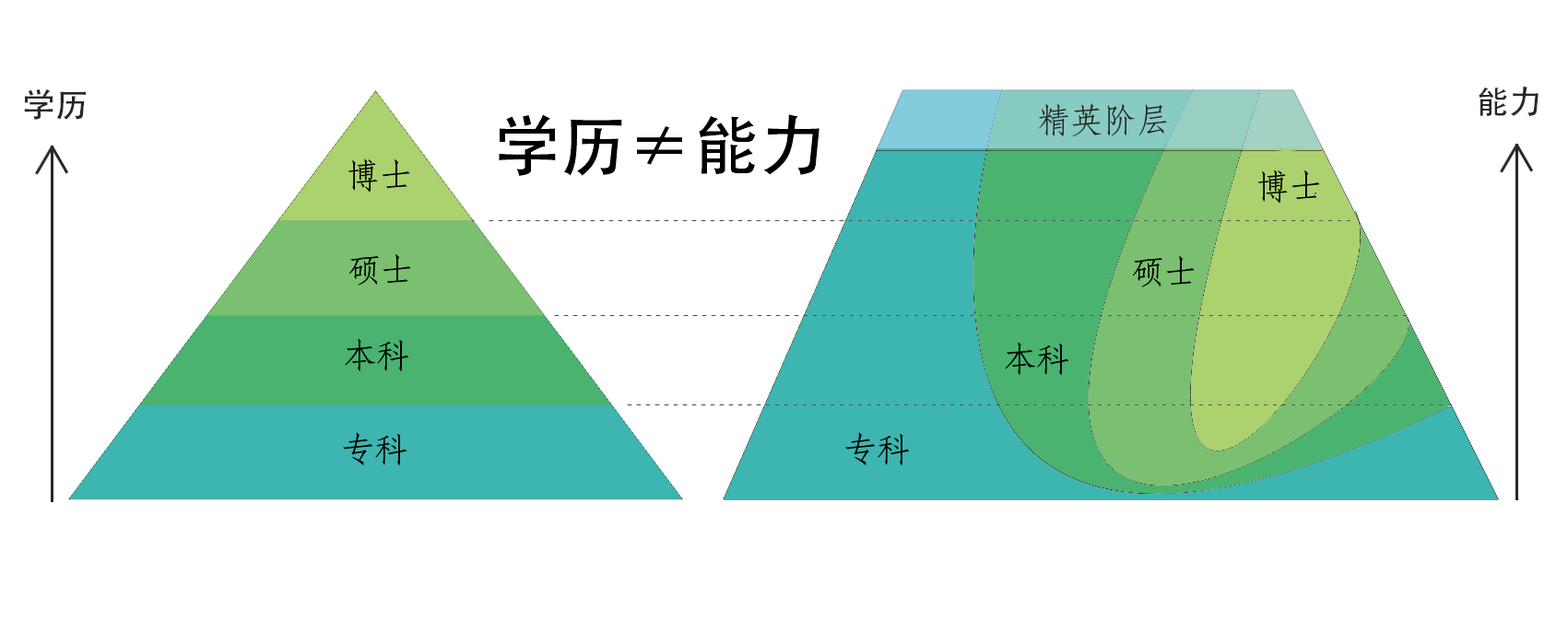
<style>
.page{position:relative;width:1568px;height:632px;background:#ffffff}
.page>*{position:absolute;margin:0}
.t1{font:33.2px "AdobeHeitiStd-Regular";color:#272727}
.t2{font:33.2px "AdobeFangsongStd-Regular";color:#272727}
.t3{font:66.4px "AdobeHeitiStd-Regular";color:#000000}
.t4{font:33.2px "AdobeFangsongStd-Regular";color:#000000}
</style>
<div class="page">
<p class="t1" style="left:24px;top:88px;width:62px;height:32px">学历</p>
<p class="t1" style="left:1479px;top:86px;width:60px;height:30px">能力</p>
<p class="t2" style="left:1039px;top:103px;width:128px;height:34px">精英阶层</p>
<p class="t3" style="left:499px;top:114px;width:320px;height:62px">学历≠能力</p>
<p class="t4" style="left:348px;top:159px;width:62px;height:34px">博士</p>
<p class="t4" style="left:1257px;top:170px;width:63px;height:34px">博士</p>
<p class="t4" style="left:348px;top:254px;width:63px;height:32px">硕士</p>
<p class="t4" style="left:1132px;top:256px;width:63px;height:32px">硕士</p>
<p class="t4" style="left:345px;top:338px;width:64px;height:33px">本科</p>
<p class="t4" style="left:1005px;top:342px;width:64px;height:33px">本科</p>
<p class="t4" style="left:343px;top:432px;width:64px;height:34px">专科</p>
<p class="t4" style="left:845px;top:432px;width:65px;height:34px">专科</p>
</div>
